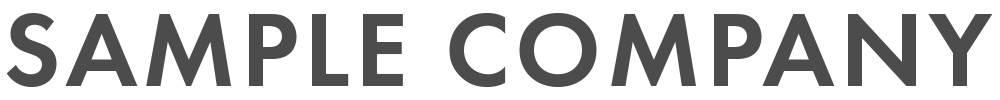
<style>
.page{position:relative;width:1000px;height:100px;background:#ffffff}
.page>*{position:absolute;margin:0}
.t1{font:107.6px "FuturaPT-Demi";letter-spacing:0.05em;color:#4c4c4c}
</style>
<div class="page">
<p class="t1" style="left:6px;top:13px;width:987px;height:74px">SAMPLE COMPANY</p>
</div>
